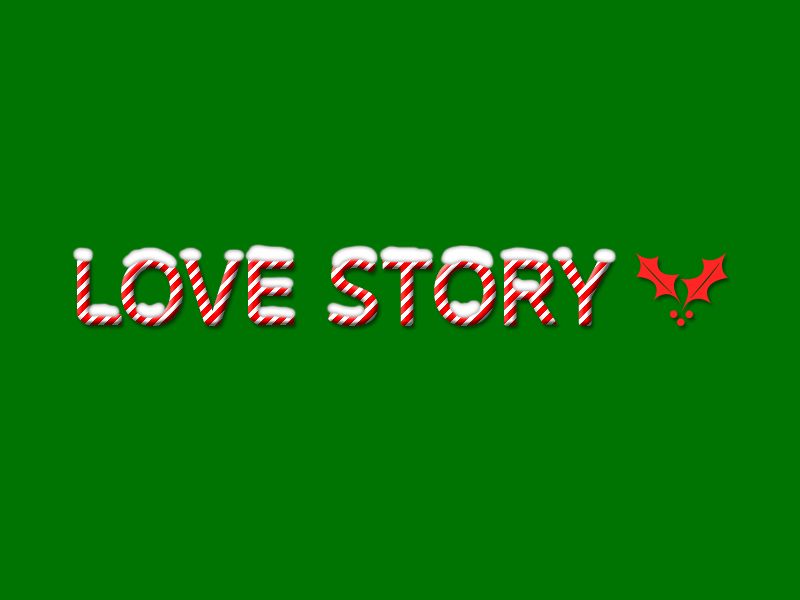
<style>
.page{position:relative;width:800px;height:600px;background:#007403}
.page>*{position:absolute;margin:0}
.t1{font:90px "GodoB"}
</style>
<div class="page">
<p class="t1" style="left:77px;top:257px;width:537px;height:69px">LOVE STORY</p>
</div>
